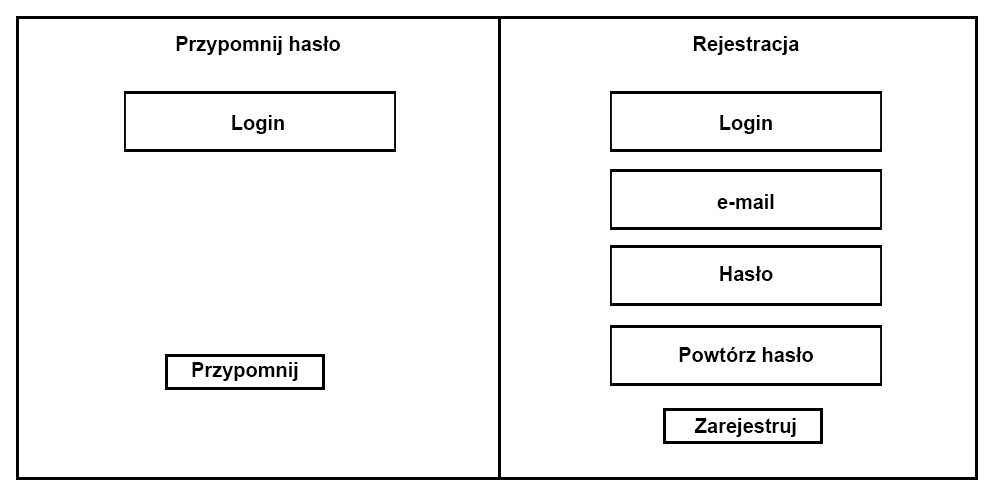
<style>
.page{position:relative;width:1000px;height:500px;background:#ffffff}
.page>*{position:absolute;margin:0}
.t1{font:20px "Arial-BoldMT";color:#000000}
</style>
<div class="page">
<p class="t1" style="left:176px;top:36px;width:164px;height:19px">Przypomnij hasło</p>
<p class="t1" style="left:694px;top:36px;width:105px;height:19px">Rejestracja</p>
<p class="t1" style="left:232px;top:115px;width:52px;height:19px">Login</p>
<p class="t1" style="left:720px;top:115px;width:52px;height:19px">Login</p>
<p class="t1" style="left:717px;top:194px;width:57px;height:15px">e-mail</p>
<p class="t1" style="left:720px;top:266px;width:53px;height:15px">Hasło</p>
<p class="t1" style="left:679px;top:347px;width:134px;height:15px">Powtórz hasło</p>
<p class="t1" style="left:192px;top:362px;width:106px;height:19px">Przypomnij</p>
<p class="t1" style="left:694px;top:418px;width:102px;height:19px">Zarejestruj</p>
</div>
